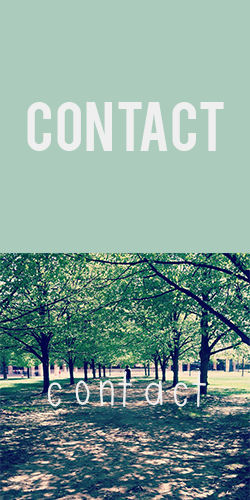
<style>
.page{position:relative;width:250px;height:500px;background:#abccbd}
.page>*{position:absolute;margin:0}
.t1{font:55px "Bebas";color:#efefef}
.t2{font:55px "ElsieTallnSkinny";color:#efefef}
</style>
<div class="page">
<p class="t1" style="left:27px;top:102px;width:197px;height:49px">contact</p>
<p class="t2" style="left:47px;top:371px;width:159px;height:36px">contact</p>
</div>
